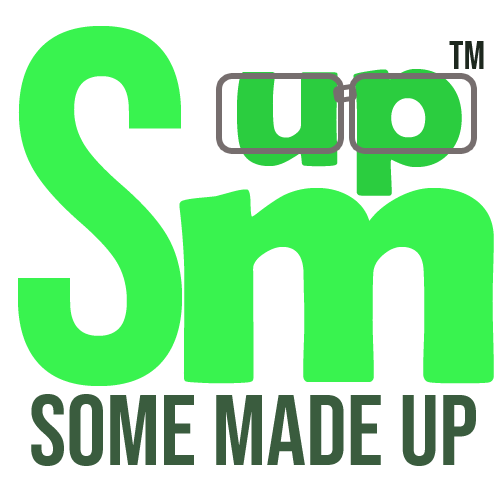
<style>
.page{position:relative;width:500px;height:500px;background:#ffffff}
.page>*{position:absolute;margin:0}
.t1{font:500px "BebasNeue-Regular";color:#39f34f}
.t2{font:40px "BebasNeue-Regular";color:#1d281e}
.t3{font:200px "BerlinSansFBDemi-Bold";color:#2bcd3f}
.t4{font:400px "BerlinSansFBDemi-Bold";color:#39f34f}
.t5{font:100px "BebasNeue-Regular";color:#3a5c3e}
</style>
<div class="page">
<p class="t1" style="left:18px;top:26px;width:164px;height:360px">S</p>
<p class="t2" style="left:449px;top:41px;width:35px;height:28px">tm</p>
<p class="t3" style="left:237px;top:69px;width:225px;height:127px">up</p>
<p class="t4" style="left:179px;top:188px;width:315px;height:196px">m</p>
<p class="t5" style="left:31px;top:394px;width:445px;height:72px">some Made UP</p>
</div>
